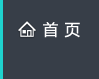
<style>
.page{position:relative;width:99px;height:79px;background:#373e48}
.page>*{position:absolute;margin:0}
.t1{font:15.6px "MicrosoftYaHeiUI";letter-spacing:0.05em;color:#ffffff}
</style>
<div class="page">
<p class="t1" style="left:43px;top:22px;width:37px;height:16px">首 页</p>
</div>
